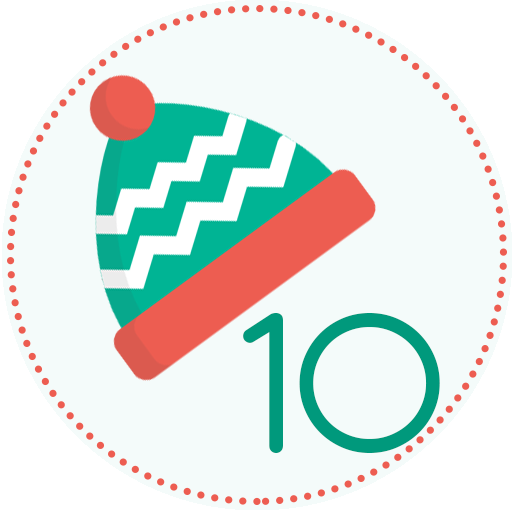
<style>
.page{position:relative;width:512px;height:512px;background:#f4fbfa}
.page>*{position:absolute;margin:0}
.t1{font:220.4px "Antipasto";color:#00997c}
</style>
<div class="page">
<p class="t1" style="left:243px;top:313px;width:197px;height:140px">10</p>
</div>
